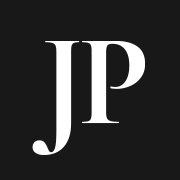
<style>
.page{position:relative;width:180px;height:180px;background:#181818}
.page>*{position:absolute;margin:0}
.t1{font:130px "CormorantGaramond-Bold";letter-spacing:-0.05em;color:#ffffff}
</style>
<div class="page">
<p class="t1" style="left:32px;top:41px;width:113px;height:114px">JP</p>
</div>
